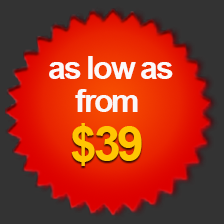
<style>
.page{position:relative;width:224px;height:224px;background:#333333}
.page>*{position:absolute;margin:0}
.t1{font:32px "Arial-BoldMT";letter-spacing:-0.065em;color:#fcf9f9}
.t2{font:32px "Arial-BoldMT";letter-spacing:-0.065em;color:#f9f7f7}
.t3{font:48px "Arial-BoldMT";letter-spacing:-0.065em;color:#ffc602}
</style>
<div class="page">
<p class="t1" style="left:49px;top:56px;width:124px;height:23px">as low as</p>
<p class="t2" style="left:75px;top:89px;width:63px;height:23px">from</p>
<p class="t3" style="left:71px;top:123px;width:71px;height:43px">$39</p>
</div>
